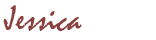
<style>
.page{position:relative;width:156px;height:40px;background:#ffffff}
.page>*{position:absolute;margin:0}
.t1{font:36px "Mistral";color:#8b4040}
</style>
<div class="page">
<p class="t1" style="left:3px;top:5px;width:79px;height:26px">Jessica</p>
</div>
